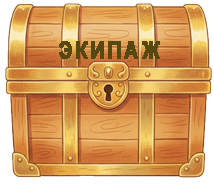
<style>
.page{position:relative;width:214px;height:184px}
.page>*{position:absolute;margin:0}
.t1{font:24px "ArialNarrow-Bold";letter-spacing:0.1em;color:#554813;font-weight:bold}
</style>
<div class="page">
<p class="t1" style="left:59px;top:41px;width:101px;height:18px">ЭКИПАЖ</p>
</div>
